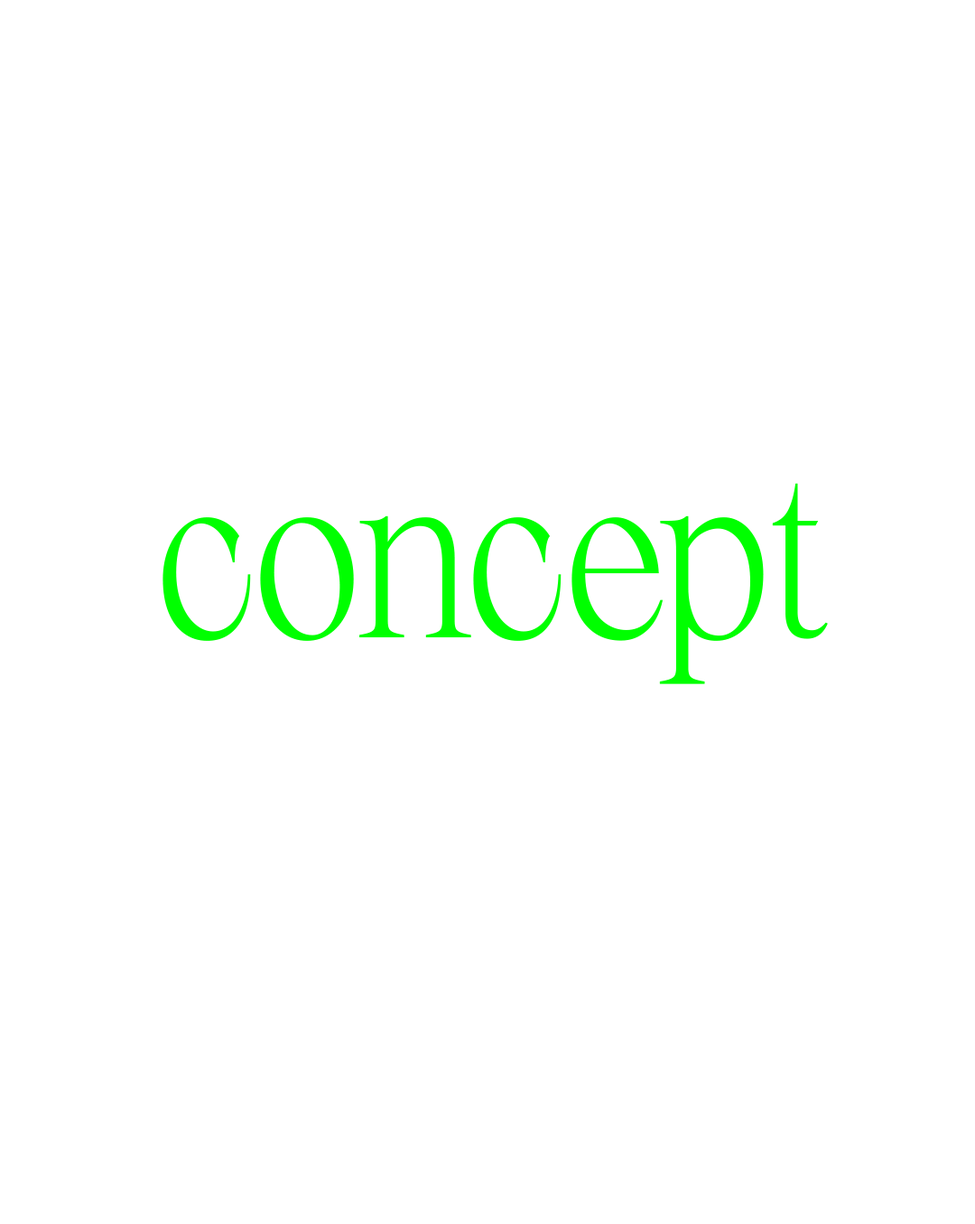
<style>
.page{position:relative;width:975px;height:1224px;background:#ffffff}
.page>*{position:absolute;margin:0}
.t1{font:232.9px "Skanaus-Regular";color:#00ff00}
</style>
<div class="page">
<p class="t1" style="left:162px;top:483px;width:665px;height:201px">concept</p>
</div>
